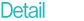
<style>
.page{position:relative;width:84px;height:21px;background:#ffffff}
.page>*{position:absolute;margin:0}
.t1{font:20px "GothicMB101Pro-Regular";letter-spacing:-0.06em;color:#1dbcc0;scale:0.9 1}
</style>
<div class="page">
<p class="t1" style="left:1px;top:2px;width:44px;height:16px">Detail</p>
</div>
